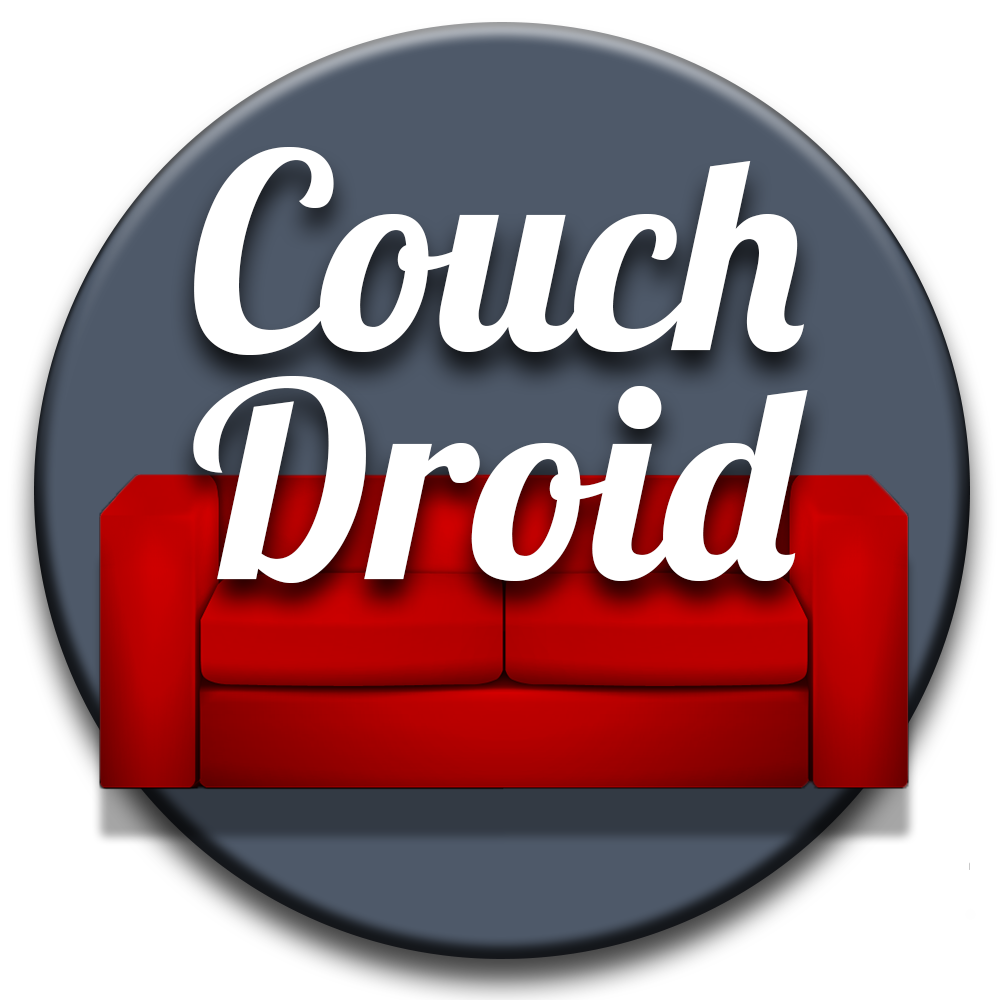
<style>
.page{position:relative;width:1000px;height:1000px;background:#ffffff}
.page>*{position:absolute;margin:0}
.t1{font:270px "LobsterTwo-BoldItalic";color:#ffffff}
</style>
<div class="page">
<p class="t1" style="left:194px;top:146px;width:610px;height:209px">Couch</p>
<p class="t1" style="left:193px;top:375px;width:615px;height:208px">Droid</p>
</div>
